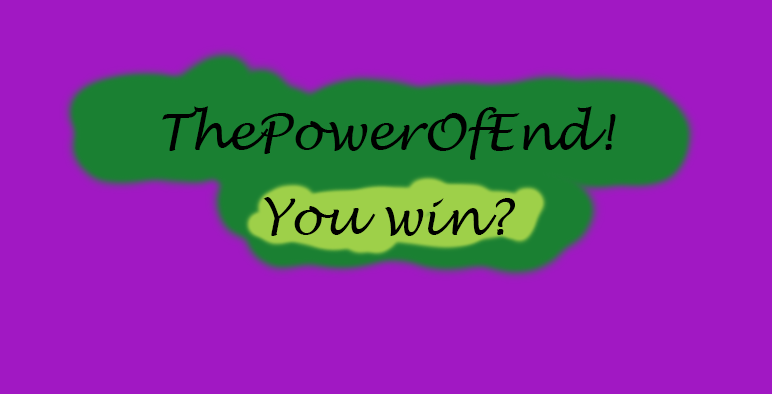
<style>
.page{position:relative;width:772px;height:394px;background:#a118c3}
.page>*{position:absolute;margin:0}
.t1{font:50px "LucidaHandwriting-Italic";color:#000000}
</style>
<div class="page">
<p class="t1" style="left:162px;top:106px;width:454px;height:54px">ThePowerOfEnd!</p>
<p class="t1" style="left:263px;top:197px;width:252px;height:39px">You win?</p>
</div>
